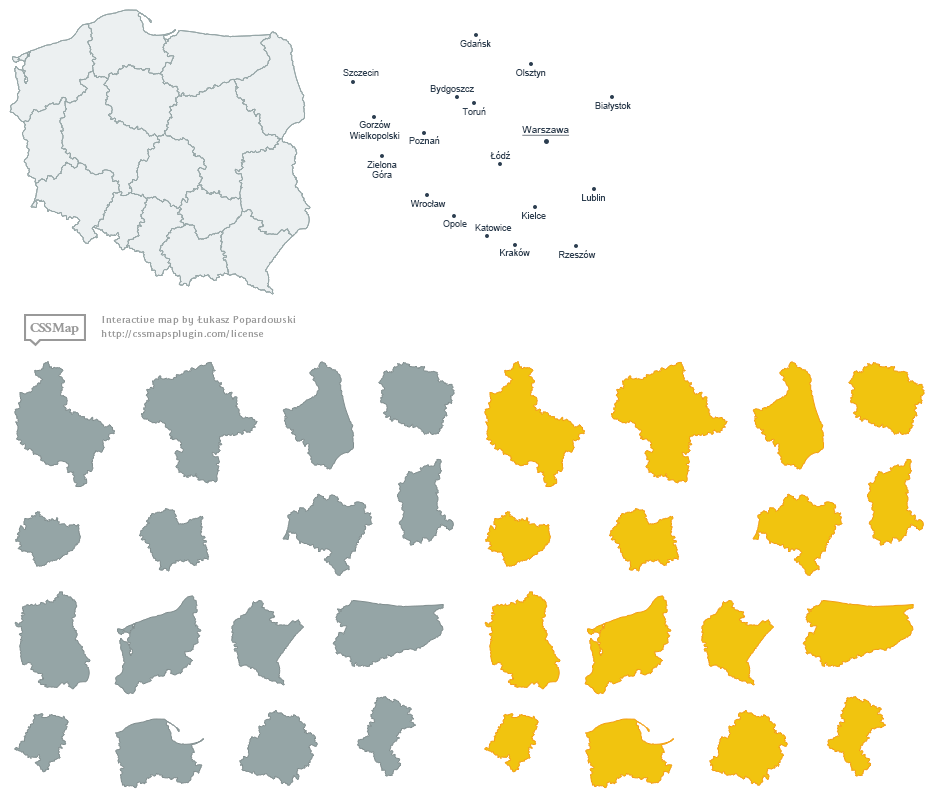
<style>
.page{position:relative;width:940px;height:803px;background:#ffffff}
.page>*{position:absolute;margin:0}
.t1{font:9px "ArialMT";color:#2c3e50}
.t2{font:10px "ArialMT";color:#2c3e50;text-decoration:underline}
</style>
<div class="page">
<p class="t1" style="left:460px;top:39px;width:31px;height:8px">Gdańsk</p>
<p class="t1" style="left:343px;top:69px;width:36px;height:7px">Szczecin</p>
<p class="t1" style="left:516px;top:69px;width:30px;height:9px">Olsztyn</p>
<p class="t1" style="left:430px;top:85px;width:44px;height:9px">Bydgoszcz</p>
<p class="t1" style="left:595px;top:102px;width:36px;height:9px">Białystok</p>
<p class="t1" style="left:462px;top:107px;width:24px;height:8px">Toruń</p>
<p class="t1" style="left:349px;top:120px;width:51px;height:21px;text-align:center">Gorzów<br>Wielkopolski</p>
<p class="t2" style="left:522px;top:126px;width:48px;height:10px">Warszawa</p>
<p class="t1" style="left:409px;top:136px;width:31px;height:8px">Poznań</p>
<p class="t1" style="left:367px;top:161px;width:30px;height:17px;text-align:center">Zielona<br>Góra</p>
<p class="t1" style="left:490px;top:151px;width:21px;height:8px">Łódź</p>
<p class="t1" style="left:582px;top:194px;width:23px;height:7px">Lublin</p>
<p class="t1" style="left:410px;top:200px;width:36px;height:7px">Wrocław</p>
<p class="t1" style="left:443px;top:220px;width:24px;height:9px">Opole</p>
<p class="t1" style="left:522px;top:212px;width:24px;height:7px">Kielce</p>
<p class="t1" style="left:475px;top:224px;width:37px;height:7px">Katowice</p>
<p class="t1" style="left:500px;top:248px;width:30px;height:8px">Kraków</p>
<p class="t1" style="left:559px;top:250px;width:37px;height:8px">Rzeszów</p>
</div>
